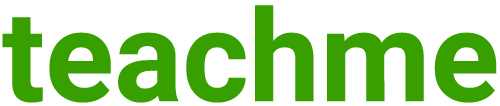
<style>
.page{position:relative;width:500px;height:106px;background:#ffffff}
.page>*{position:absolute;margin:0}
.t1{font:127.5px "Roboto-Bold";color:#37a000}
</style>
<div class="page">
<p class="t1" style="left:2px;top:5px;width:495px;height:98px">teachme</p>
</div>
